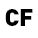
<style>
.page{position:relative;width:38px;height:38px;background:#ffffff}
.page>*{position:absolute;margin:0}
.t1{font:24px "DINPro-Black";letter-spacing:-0.025em;color:#000000}
.t2{font:12px "DINPro-Black";letter-spacing:-0.025em;color:#000000}
</style>
<div class="page">
<p class="t1" style="left:5px;top:9px;width:14px;height:17px">C</p>
<p class="t2" style="left:20px;top:9px;width:13px;height:17px">F</p>
</div>
